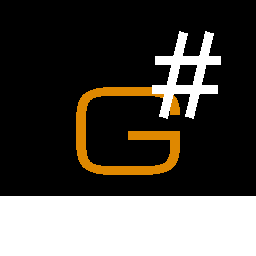
<style>
.page{position:relative;width:256px;height:256px;background:#000000}
.page>*{position:absolute;margin:0}
.t1{font:112px "Michroma";color:#ffffff}
.t2{font:112px "Michroma";color:#df8800}
</style>
<div class="page">
<p class="t1" style="left:152px;top:31px;width:69px;height:88px">#</p>
<p class="t2" style="left:76px;top:87px;width:104px;height:88px">G</p>
</div>
